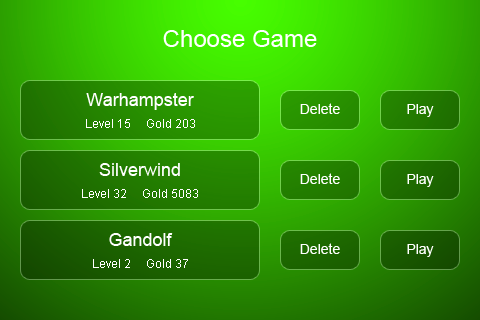
<style>
.page{position:relative;width:480px;height:320px}
.page>*{position:absolute;margin:0}
.t1{font:24px "ArialMT";color:#ffffff}
.t2{font:18px "ArialMT";color:#ffffff}
.t3{font:14px "ArialMT";color:#ffffff}
.t4{font:12px "ArialMT";color:#ffffff}
</style>
<div class="page">
<p class="t1" style="left:163px;top:30px;width:154px;height:17px">Choose Game</p>
<p class="t2" style="left:86px;top:93px;width:108px;height:17px">Warhampster</p>
<p class="t3" style="left:300px;top:103px;width:40px;height:11px">Delete</p>
<p class="t3" style="left:407px;top:104px;width:27px;height:13px">Play</p>
<p class="t4" style="left:86px;top:119px;width:109px;height:9px">Level 15     Gold 203</p>
<p class="t2" style="left:99px;top:163px;width:81px;height:13px">Silverwind</p>
<p class="t3" style="left:300px;top:173px;width:40px;height:11px">Delete</p>
<p class="t3" style="left:407px;top:174px;width:27px;height:13px">Play</p>
<p class="t4" style="left:82px;top:189px;width:116px;height:9px">Level 32     Gold 5083</p>
<p class="t2" style="left:109px;top:233px;width:64px;height:13px">Gandolf</p>
<p class="t3" style="left:300px;top:243px;width:40px;height:11px">Delete</p>
<p class="t3" style="left:407px;top:244px;width:27px;height:13px">Play</p>
<p class="t4" style="left:93px;top:259px;width:95px;height:9px">Level 2     Gold 37</p>
</div>
